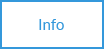
<style>
.page{position:relative;width:104px;height:49px;background:#ffffff}
.page>*{position:absolute;margin:0}
.t1{font:15px "Lato-Regular";color:#3498db}
</style>
<div class="page">
<p class="t1" style="left:39px;top:19px;width:25px;height:11px">Info</p>
</div>
